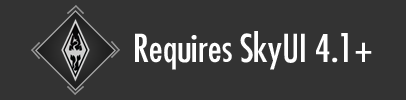
<style>
.page{position:relative;width:406px;height:100px;background:#333333}
.page>*{position:absolute;margin:0}
.t1{font:37.5px "Futura-Condensed-Normal";color:#ffffff}
</style>
<div class="page">
<p class="t1" style="left:135px;top:31px;width:237px;height:39px">Requires SkyUI 4.1+</p>
</div>
